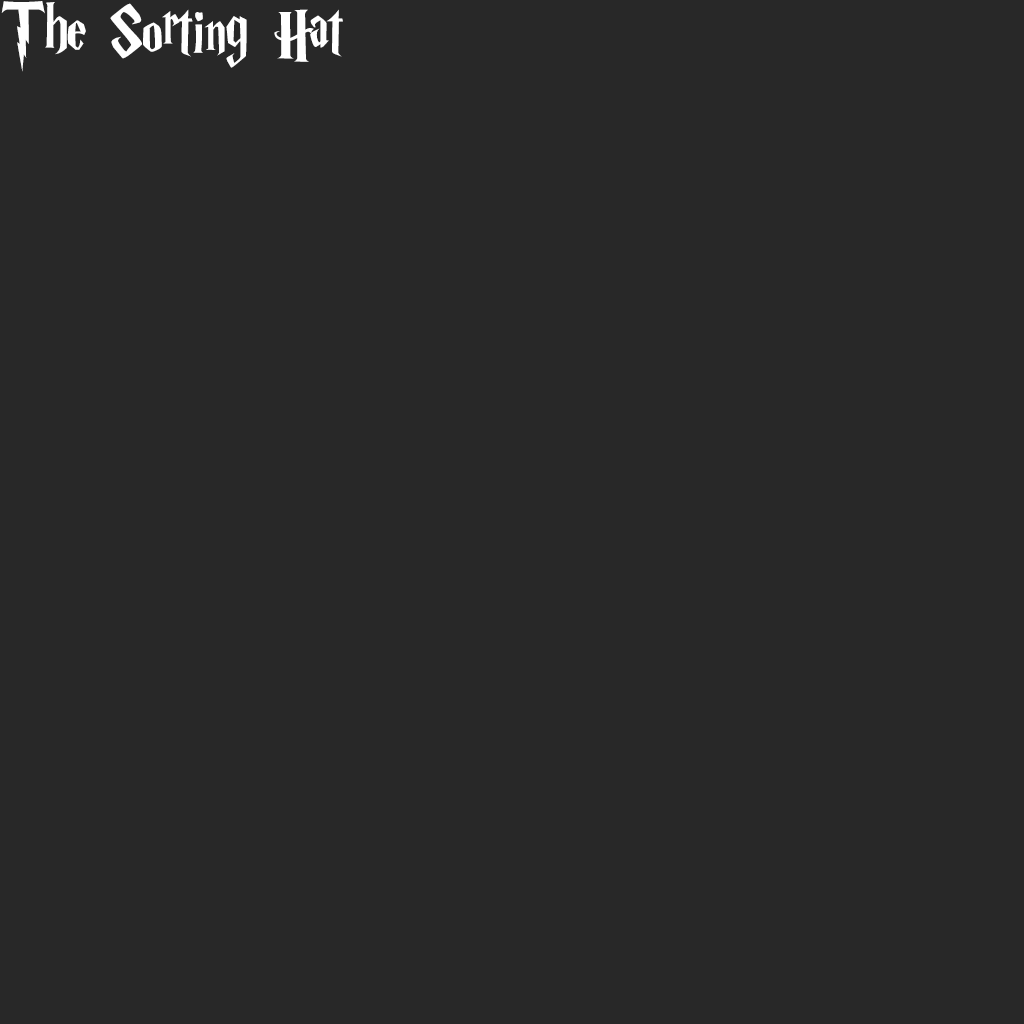
<style>
.page{position:relative;width:1024px;height:1024px;background:#282828}
.page>*{position:absolute;margin:0}
.t1{font:122px "HarryP";letter-spacing:-0.005em;color:#ffffff}
</style>
<div class="page">
<p class="t1" style="left:1px;top:1px;width:342px;height:71px">The Sorting Hat</p>
</div>
